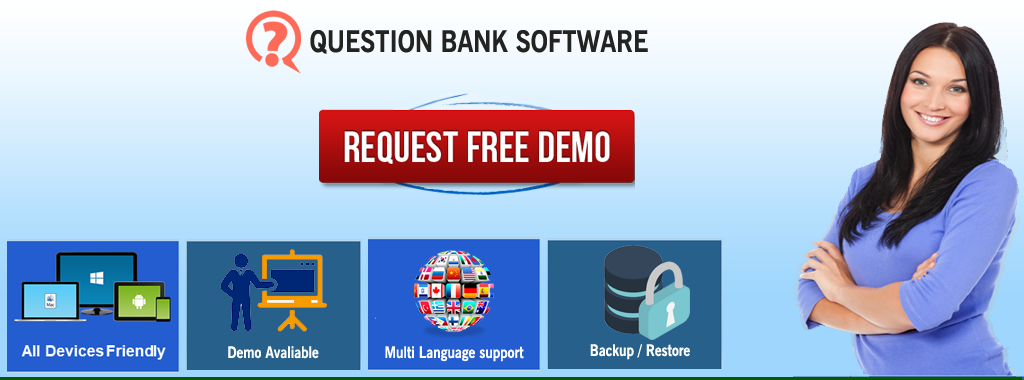
<style>
.page{position:relative;width:1024px;height:380px}
.page>*{position:absolute;margin:0}
.t1{font:29.9px "NewsGothicBT-Bold";color:#232322;scale:0.85 1}
.t2{font:15.9px "NewsGothicBT-Bold";color:#fbfbfb;scale:0.85 1}
.t3{font:15.9px "NewsGothicBT-Bold";color:#fdfdfd;scale:0.85 1}
</style>
<div class="page">
<p class="t1" style="left:310px;top:30px;width:338px;height:24px">QUESTION BANK SOFTWARE</p>
<p class="t2" style="left:228px;top:346px;width:91px;height:13px">Demo Avaliable</p>
<p class="t3" style="left:385px;top:346px;width:139px;height:16px">Multi Language support</p>
<p class="t3" style="left:590px;top:344px;width:100px;height:16px">Backup / Restore</p>
</div>
